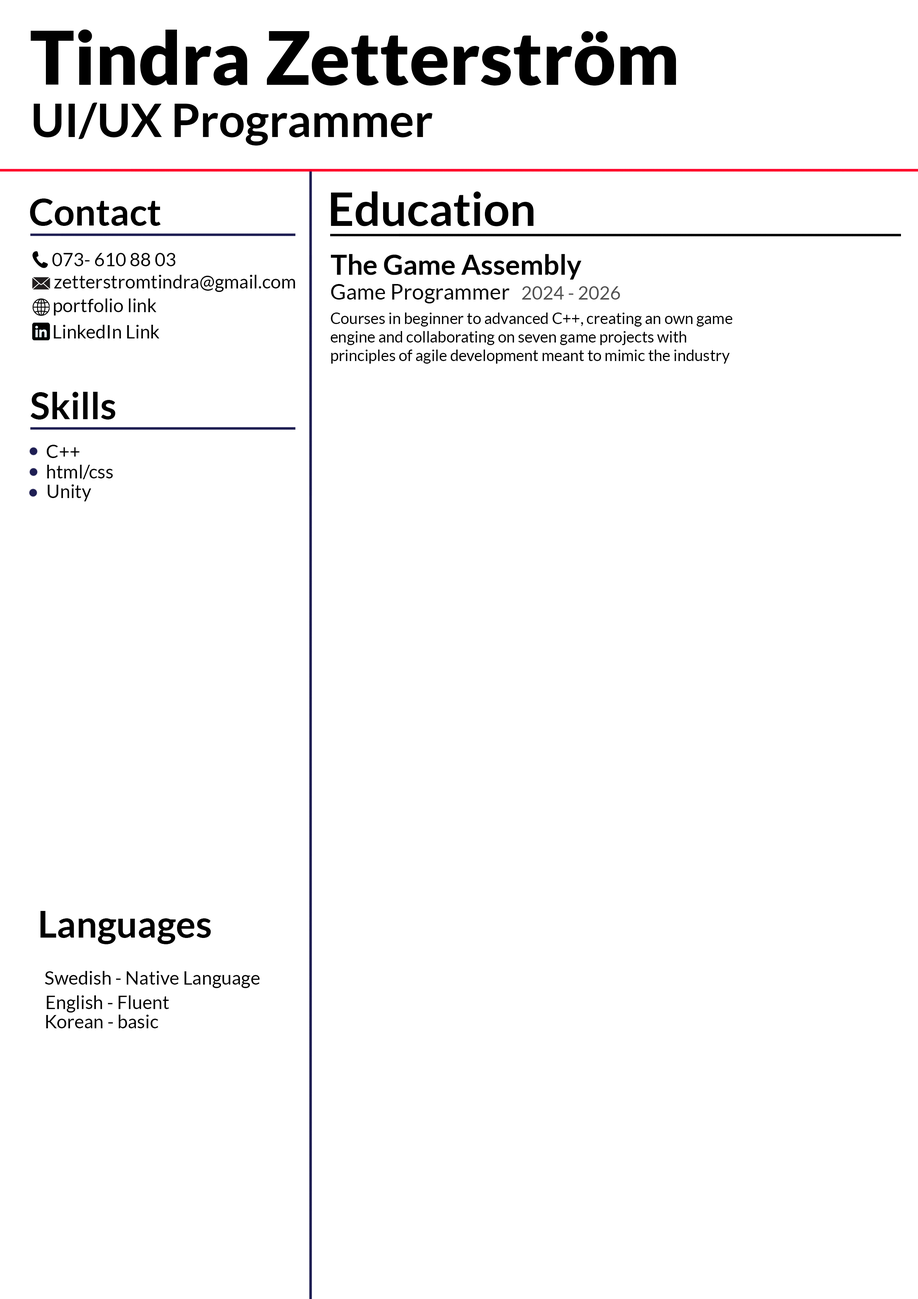
<style>
.page{position:relative;width:918px;height:1299px;background:#ffffff}
.page>*{position:absolute;margin:0}
.t1{font:74px "Lato-Black";color:#000000}
.t2{font:46.3px "Lato-Bold";color:#000000}
.t3{font:37px "Lato-Bold";color:#000000}
.t4{font:18.5px "Lato-Regular";color:#000000}
.t5{font:27.8px "Lato-Bold";color:#000000}
.t6{font:21.6px "Lato-Regular";color:#000000}
.t7{font:18.5px "Lato-Regular";color:#515151}
.t8{font:15.4px "Lato-Regular";color:#000000}
</style>
<div class="page">
<p class="t1" style="left:31px;top:29px;width:645px;height:57px">Tindra Zetterström</p>
<p class="t2" style="left:34px;top:103px;width:399px;height:42px">UI/UX Programmer</p>
<p class="t2" style="left:331px;top:191px;width:203px;height:35px">Education</p>
<p class="t3" style="left:30px;top:198px;width:131px;height:28px">Contact</p>
<p class="t4" style="left:52px;top:253px;width:123px;height:13px">073- 610 88 03</p>
<p class="t5" style="left:331px;top:254px;width:251px;height:26px">The Game Assembly</p>
<p class="t4" style="left:54px;top:275px;width:241px;height:17px">zetterstromtindra@gmail.com</p>
<p class="t6" style="left:331px;top:284px;width:179px;height:20px">Game Programmer</p>
<p class="t7" style="left:522px;top:286px;width:98px;height:14px">2024 - 2026</p>
<p class="t4" style="left:54px;top:298px;width:103px;height:17px">portfolio link</p>
<p class="t8" style="left:331px;top:312px;width:402px;height:52px">Courses in beginner to advanced C++, creating an own game<br>engine and collaborating on seven game projects with <br>principles of agile development meant to mimic the industry</p>
<p class="t4" style="left:54px;top:325px;width:106px;height:13px">LinkedIn Link</p>
<p class="t3" style="left:31px;top:392px;width:85px;height:27px">Skills</p>
<p class="t4" style="left:47px;top:445px;width:33px;height:13px">C++</p>
<p class="t4" style="left:47px;top:465px;width:66px;height:14px">html/css</p>
<p class="t4" style="left:48px;top:484px;width:43px;height:17px">Unity</p>
<p class="t3" style="left:40px;top:911px;width:171px;height:33px">Languages</p>
<p class="t4" style="left:45px;top:971px;width:215px;height:17px">Swedish - Native Language</p>
<p class="t4" style="left:47px;top:995px;width:122px;height:18px">English - Fluent</p>
<p class="t4" style="left:46px;top:1014px;width:112px;height:14px">Korean - basic</p>
</div>
